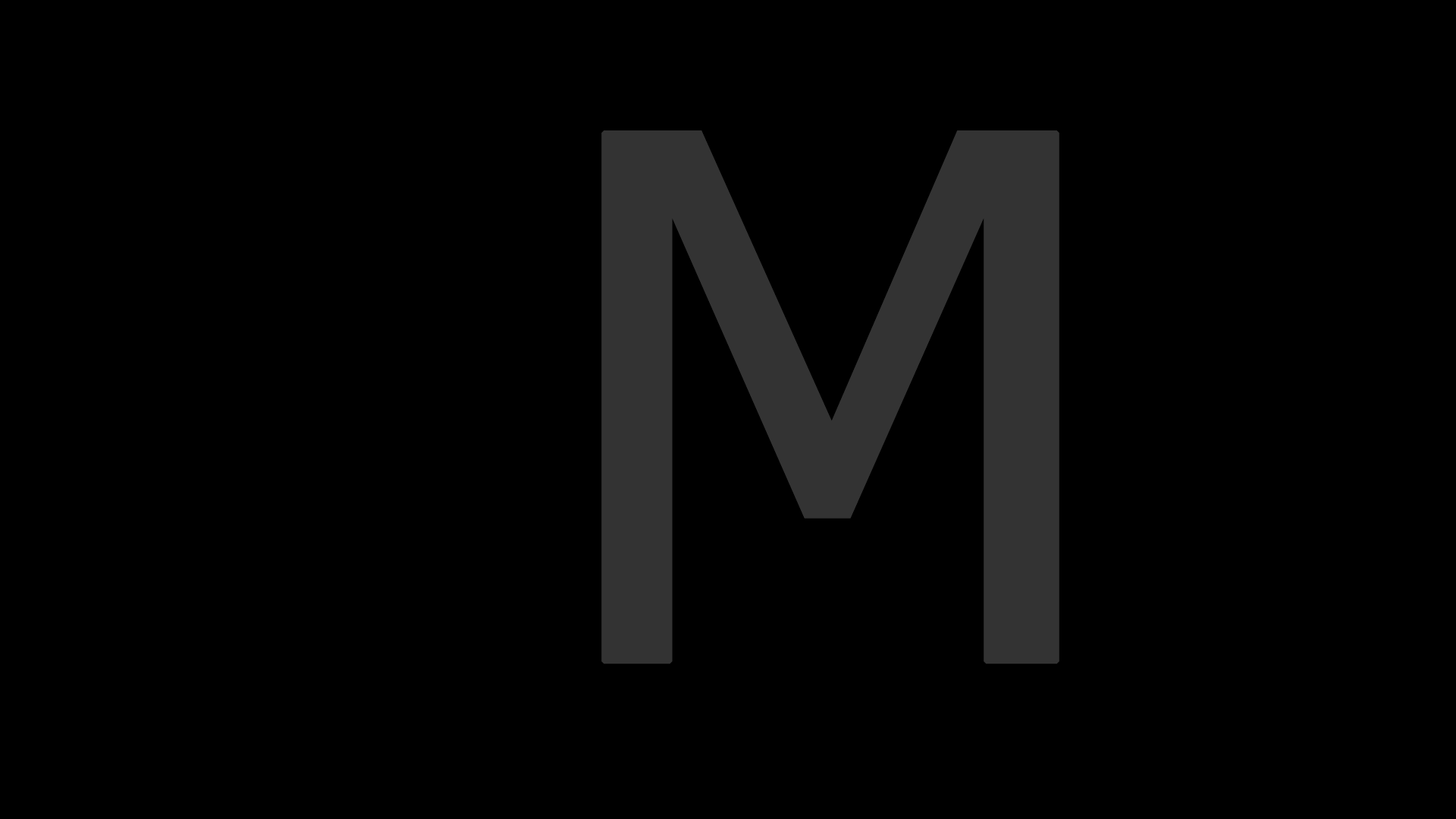
<style>
.page{position:relative;width:1456px;height:819px;background:#000000}
.page>*{position:absolute;margin:0}
.t1{font:726.7px "Tahoma";color:#333333;text-transform:uppercase;font-weight:bold}
</style>
<div class="page">
<p class="t1" style="left:601px;top:130px;width:458px;height:534px">m</p>
</div>
